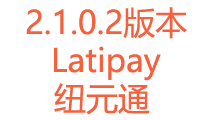
<style>
.page{position:relative;width:206px;height:120px;background:#ffffff}
.page>*{position:absolute;margin:0}
.t1{font:32px "MicrosoftYaHei";color:#f5603d}
</style>
<div class="page">
<p class="t1" style="left:26px;top:7px;width:161px;height:32px">2.1.0.2版本</p>
<p class="t1" style="left:54px;top:46px;width:107px;height:35px">Latipay</p>
<p class="t1" style="left:54px;top:83px;width:96px;height:32px">纽元通</p>
</div>
